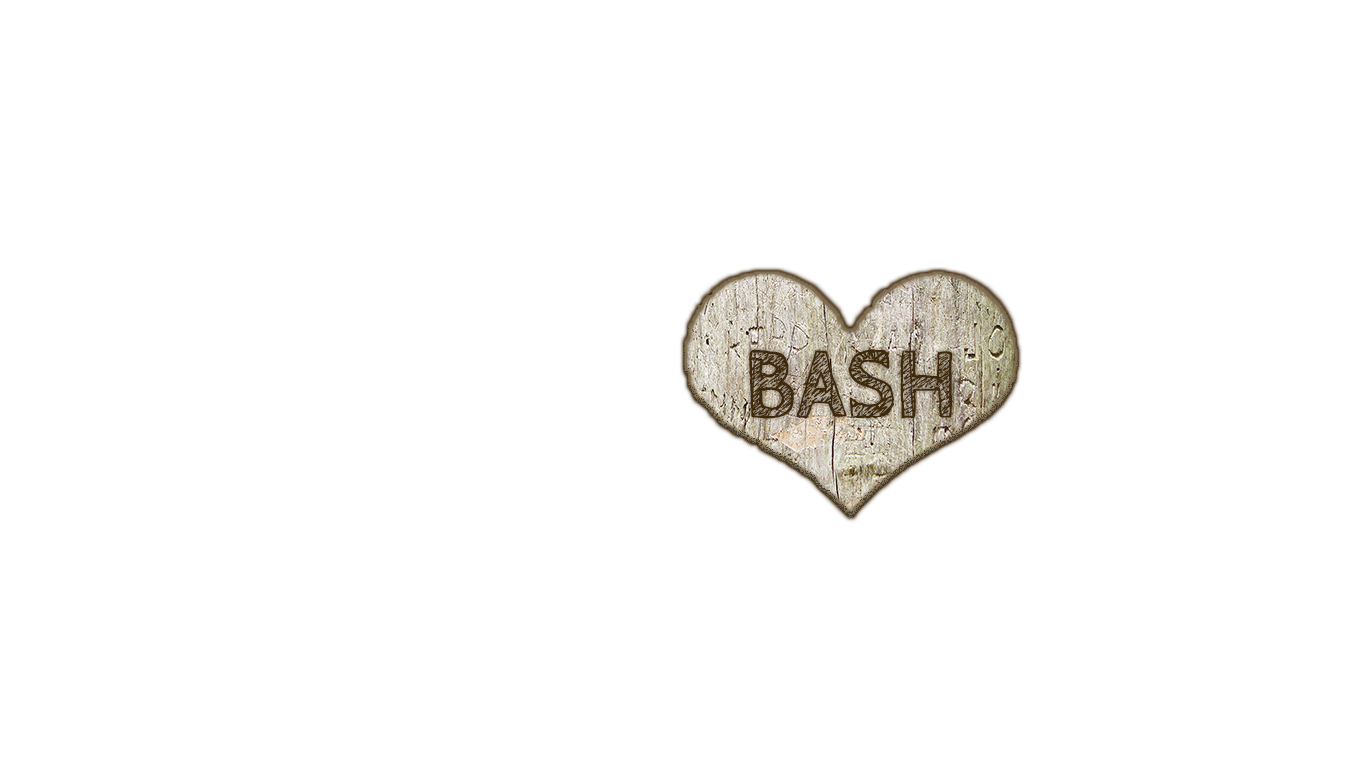
<style>
.page{position:relative;width:1366px;height:768px;background:#ffffff}
.page>*{position:absolute;margin:0}
.t1{font:104.6px "CabinSketch-Bold";color:#3e2a0b;scale:0.85 1}
</style>
<div class="page">
<p class="t1" style="left:749px;top:349px;width:204px;height:70px">BASH</p>
</div>
